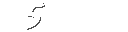
<style>
.page{position:relative;width:128px;height:32px;background:#ffffff}
.page>*{position:absolute;margin:0}
.t1{font:43px "DomDiagonalBT-Regular";letter-spacing:0.075em;color:#ffffff;scale:1.05 1}
</style>
<div class="page">
<p class="t1" style="left:25px;top:3px;width:20px;height:27px">5</p>
</div>
